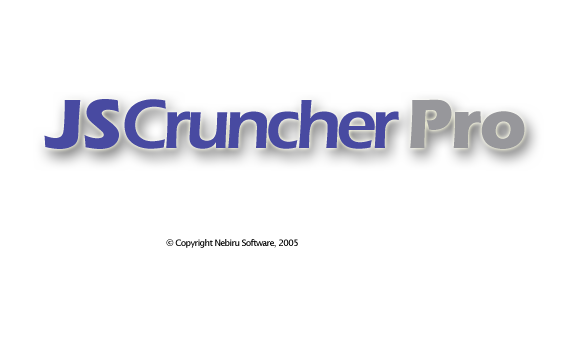
<style>
.page{position:relative;width:576px;height:360px;background:#ffffff}
.page>*{position:absolute;margin:0}
.t1{font:72px "ErasITC-Demi";letter-spacing:-0.075em;color:#484aa2}
.t2{font:72px "ErasITC-Bold";letter-spacing:-0.01em;color:#484aa2}
.t3{font:72px "ErasITC-Bold";letter-spacing:-0.025em;color:#98989c}
.t4{font:9px "LucidaSans";letter-spacing:-0.075em;color:#000000}
</style>
<div class="page">
<p class="t1" style="left:44px;top:99px;width:481px;height:50px"><span class="t2">JS</span>Cruncher <span class="t3">Pro</span></p>
<p class="t4" style="left:166px;top:239px;width:132px;height:9px">© Copyright Nebiru Software, 2005</p>
</div>
